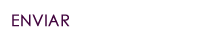
<style>
.page{position:relative;width:198px;height:40px;background:#ffffff}
.page>*{position:absolute;margin:0}
.t1{font:16px "CenturyGothic";color:#440740;font-weight:bold}
</style>
<div class="page">
<p class="t1" style="left:12px;top:14px;width:58px;height:13px">ENVIAR</p>
</div>
